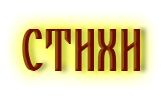
<style>
.page{position:relative;width:164px;height:100px;background:#ffffff}
.page>*{position:absolute;margin:0}
.t1{font:58.3px "ALaRuss";color:#690d01;font-weight:bold}
</style>
<div class="page">
<p class="t1" style="left:22px;top:29px;width:118px;height:42px">стихи</p>
</div>
